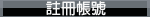
<style>
.page{position:relative;width:150px;height:17px;background:#686f75}
.page>*{position:absolute;margin:0}
.t1{font:15px "AdobeFanHeitiStd-Bold";color:#f7f7f7}
</style>
<div class="page">
<p class="t1" style="left:46px;top:1px;width:60px;height:15px">註冊帳號</p>
</div>
